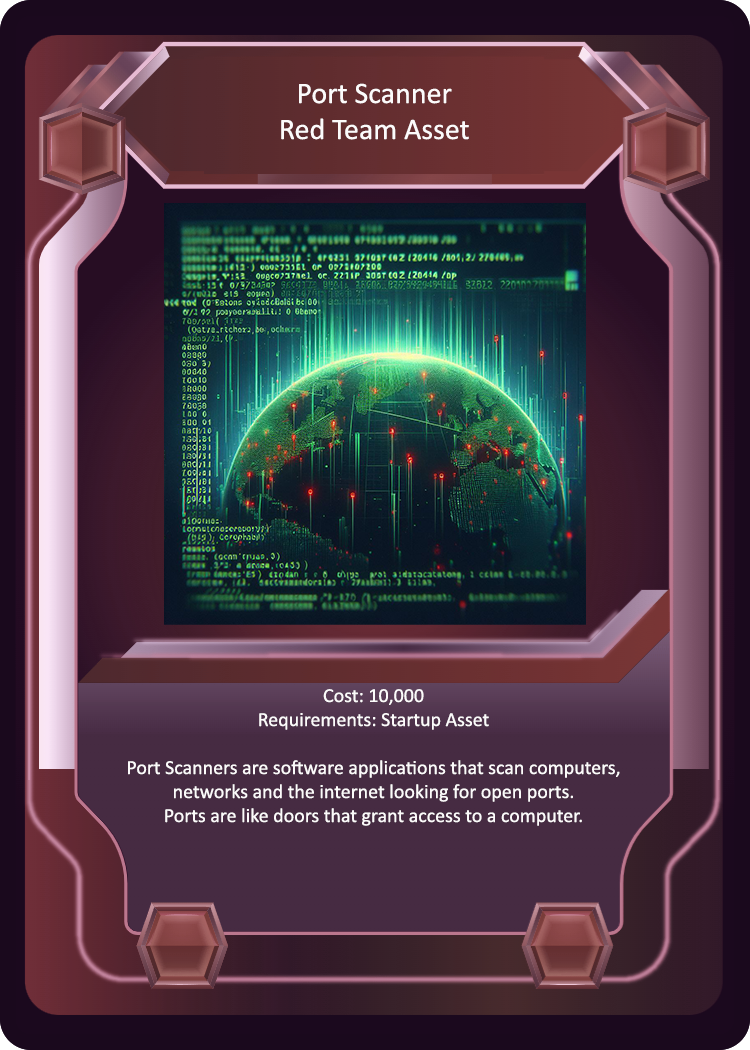
<style>
.page{position:relative;width:750px;height:1050px}
.page>*{position:absolute;margin:0}
.t1{font:30px "Calibri";color:#fcfbfb}
.t2{font:20px "Calibri";color:#fcfbfb}
</style>
<div class="page">
<p class="t1" style="left:281px;top:83px;width:188px;height:57px;text-align:center">Port Scanner<br>Red Team Asset</p>
<p class="t2" style="left:128px;top:689px;width:492px;height:137px;text-align:center">Cost: 10,000<br>Requirements: Startup Asset<br><br>Port Scanners are software applications that scan computers,<br>networks and the internet looking for open ports.<br>Ports are like doors that grant access to a computer.</p>
</div>
